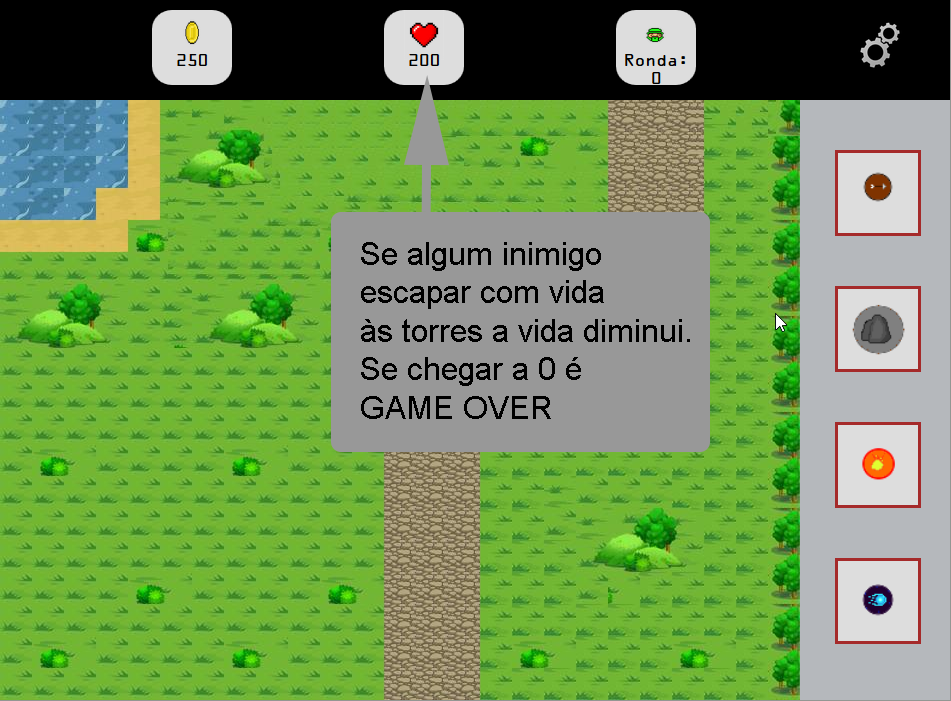
<style>
.page{position:relative;width:951px;height:701px}
.page>*{position:absolute;margin:0}
.t1{font:32px "ArialMT";color:#000000}
</style>
<div class="page">
<p class="t1" style="left:361px;top:242px;width:329px;height:177px">Se algum inimigo<br>escapar com vida<br>às torres a vida diminui.<br>Se chegar a 0 é<br>GAME OVER</p>
</div>
